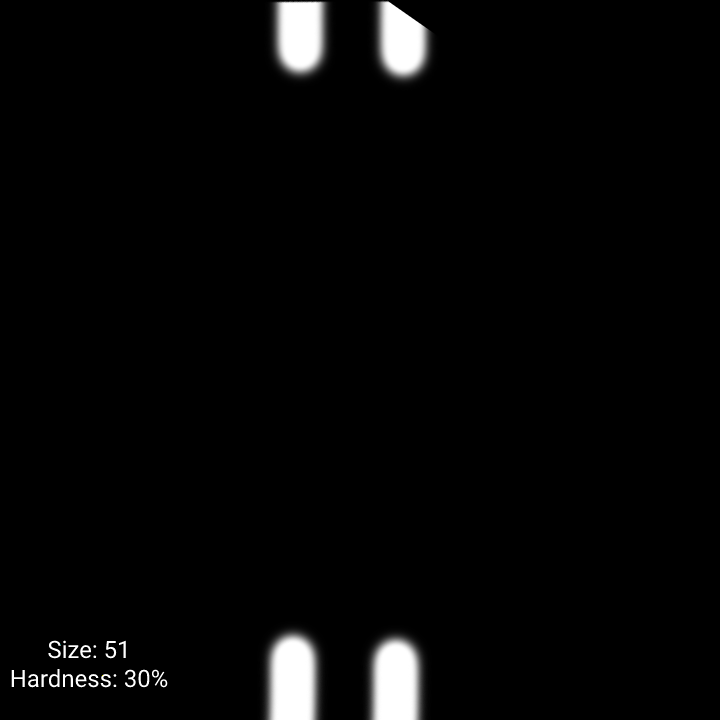
<style>
.page{position:relative;width:720px;height:720px;background:#000000}
.page>*{position:absolute;margin:0}
.t1{font:24px "Roboto-Regular";color:#ffffff}
</style>
<div class="page">
<p class="t1" style="left:11px;top:640px;width:157px;height:48px;text-align:center">Size: 51<br>Hardness: 30%</p>
</div>
